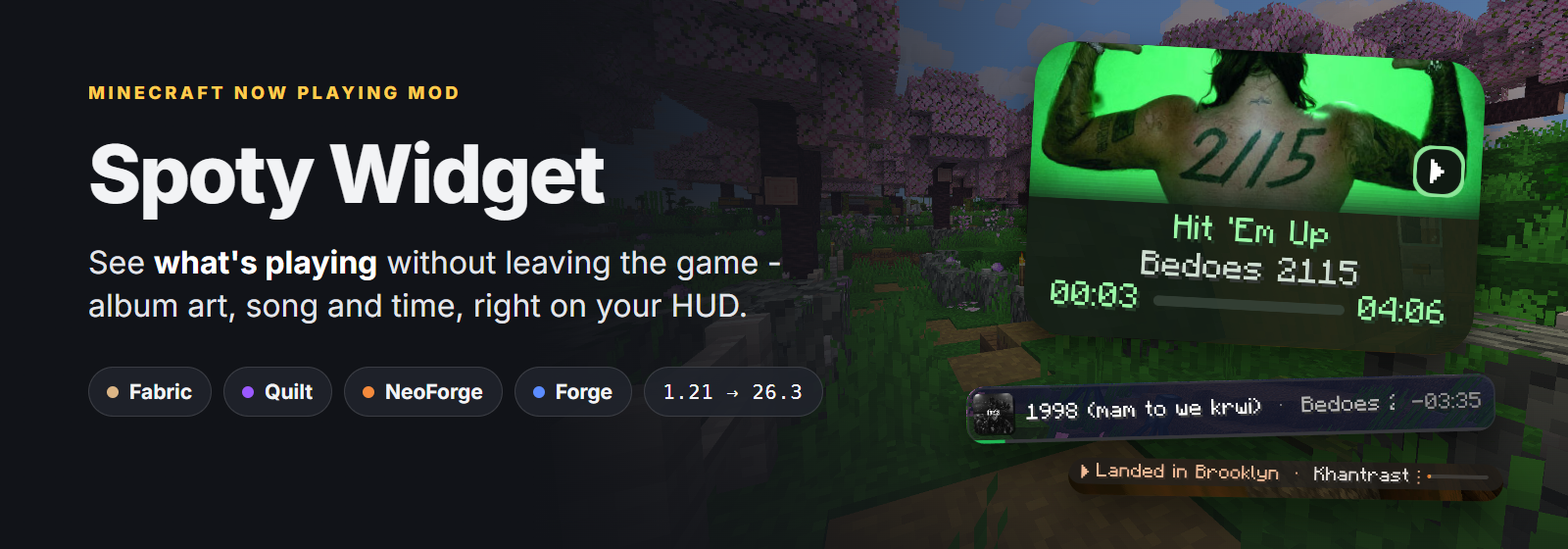
<style>
.page{position:relative;width:1568px;height:549px;background:#111318}
.page>*{position:absolute;margin:0}
.t1{font:17.6px "Inter-ExtraBold";letter-spacing:0.2em;color:#ffcc4d}
.t2{font:80.4px "Inter-ExtraBold";letter-spacing:-0.029em;color:#f2f3f5}
.t3{font:31.4px/43.1px "Inter-Regular";color:#e3e5ea}
.t4{font:31.4px/43.1px "Inter-Bold";color:#ffffff}
.t5{font:20.6px "Inter-Bold";color:#f2f3f5}
.t6{font:19.6px "DejaVuSansMono";letter-spacing:0.05em;color:#f2f3f5}
</style>
<div class="page">
<p class="t1" style="left:88px;top:85px;width:370px;height:15px">MINECRAFT NOW PLAYING MOD</p>
<p class="t2" style="left:90px;top:140px;width:516px;height:80px">Spoty Widget</p>
<p class="t3" style="left:89px;top:249px;width:691px;height:74px">See <span class="t4">what's playing</span> without leaving the game - album art, song and time, right on your HUD.</p>
<p class="t5" style="left:130px;top:382px;width:62px;height:18px">Fabric</p>
<p class="t5" style="left:265px;top:382px;width:48px;height:19px">Quilt</p>
<p class="t5" style="left:386px;top:383px;width:97px;height:21px">NeoForge</p>
<p class="t5" style="left:556px;top:383px;width:56px;height:21px">Forge</p>
<p class="t6" style="left:664px;top:384px;width:138px;height:15px">1.21 → 26.3</p>
</div>
